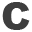
<style>
.page{position:relative;width:32px;height:32px;background:#ffffff}
.page>*{position:absolute;margin:0}
.t1{font:37.5px "Arial-Black";color:#3e3e3e}
</style>
<div class="page">
<p class="t1" style="left:2px;top:2px;width:28px;height:28px">C</p>
</div>
